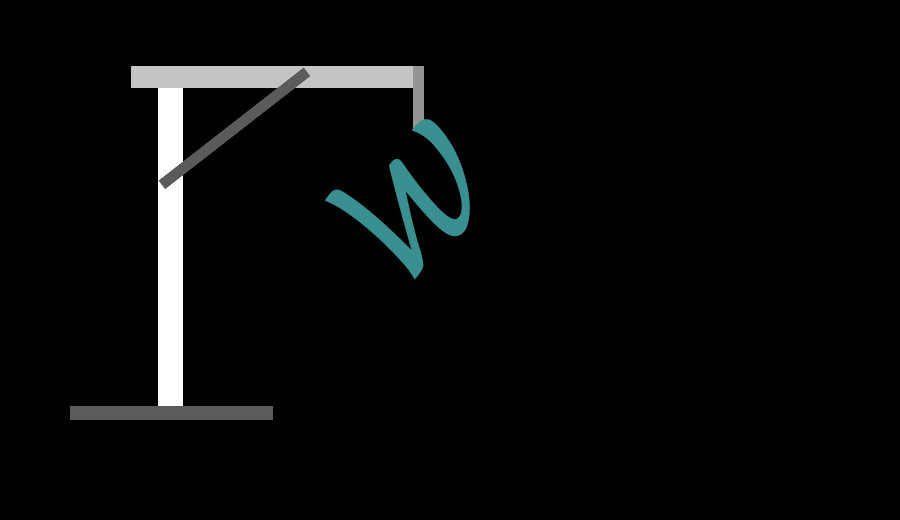
<style>
.page{position:relative;width:900px;height:520px;background:#000000}
.page>*{position:absolute;margin:0}
.t1{font:150px "LucidaHandwriting-Italic";color:#3a8f90}
</style>
<div class="page">
<p class="t1" style="left:325px;top:119px;width:145px;height:161px;rotate:-42deg">W</p>
</div>
